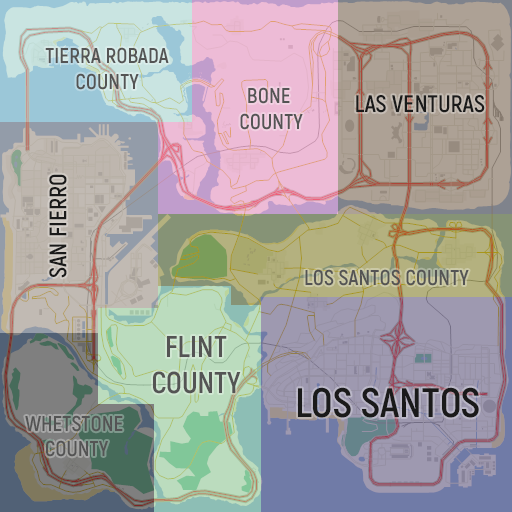
<style>
.page{position:relative;width:512px;height:512px}
.page>*{position:absolute;margin:0}
.t1{font:21.3px "Akrobat-Bold";color:#545454}
.t2{font:24px "Akrobat-Bold";color:#1a1a1a}
.t3{font:29.9px "Akrobat-Bold";color:#545454}
.t4{font:40.9px "Akrobat-Bold";color:#1a1a1a}
</style>
<div class="page">
<p class="t1" style="left:45px;top:47px;width:124px;height:43px;text-align:center">TIERRA ROBADA<br>COUNTY</p>
<p class="t1" style="left:240px;top:87px;width:63px;height:43px;text-align:center">BONE <br>COUNTY</p>
<p class="t2" style="left:356px;top:95px;width:129px;height:18px">LAS VENTURAS</p>
<p class="t2" style="left:49px;top:174px;width:18px;height:104px;rotate:-90deg">SAN FIERRO</p>
<p class="t1" style="left:305px;top:269px;width:164px;height:17px">LOS SANTOS COUNTY</p>
<p class="t3" style="left:153px;top:336px;width:88px;height:58px;text-align:center">FLINT<br>COUNTY</p>
<p class="t4" style="left:298px;top:387px;width:181px;height:31px">LOS SANTOS</p>
<p class="t1" style="left:25px;top:415px;width:98px;height:42px;text-align:center">WHETSTONE <br>COUNTY</p>
</div>
